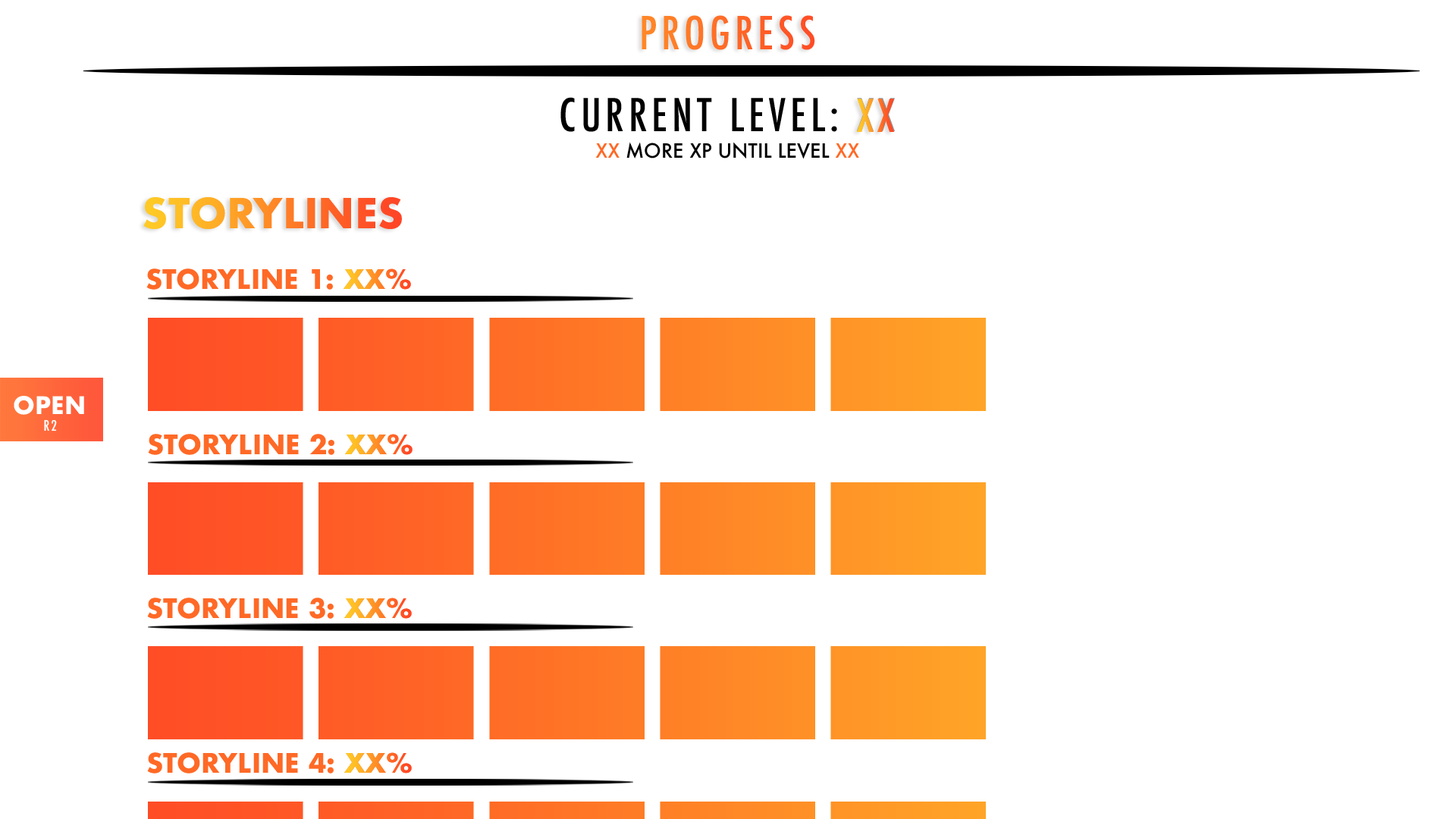
<style>
.page{position:relative;width:1456px;height:819px;background:#ffffff}
.page>*{position:absolute;margin:0}
.t1{font:44.2px "Futura-CondensedMedium";letter-spacing:0.1em}
.t2{font:44px "Futura-CondensedMedium";letter-spacing:0.1em;color:#000000}
.t3{font:44px "Futura-CondensedMedium";letter-spacing:0.1em;color:#939598}
.t4{font:44px "Futura-CondensedMedium";letter-spacing:0.1em}
.t5{font:19.1px "Futura-Medium";color:#000000}
.t6{font:19.1px "Futura-Medium";color:#ff6926}
.t7{font:19.1px "Futura-Medium";color:#ff6a27}
.t8{font:40.1px "Futura-Bold"}
.t9{font:26.2px "Futura-Bold";color:#ff6926}
.t10{font:26.2px "Futura-Bold"}
.t11{font:23.6px "Futura-Bold";color:#ffffff}
.t12{font:14.1px "Futura-CondensedMedium";letter-spacing:0.1em;color:#ffffff}
</style>
<div class="page">
<p class="t1" style="left:642px;top:15px;width:173px;height:35px">PROGRESS</p>
<p class="t2" style="left:560px;top:97px;width:335px;height:35px">CURRENT LEVEL: <span class="t3">XX</span></p>
<p class="t4" style="left:857px;top:99px;width:37px;height:33px">XX</p>
<p class="t5" style="left:595px;top:142px;width:264px;height:17px"><span class="t6">XX</span> MORE XP UNTIL LEVEL <span class="t7">XX</span></p>
<p class="t8" style="left:143px;top:197px;width:259px;height:32px">STORYLINES</p>
<p class="t9" style="left:146px;top:268px;width:265px;height:22px">STORYLINE 1: XX%</p>
<p class="t10" style="left:344px;top:268px;width:67px;height:22px">XX%</p>
<p class="t11" style="left:14px;top:396px;width:70px;height:19px">OPEN</p>
<p class="t12" style="left:44px;top:419px;width:13px;height:12px">R2</p>
<p class="t9" style="left:148px;top:434px;width:265px;height:21px">STORYLINE 2: XX%</p>
<p class="t10" style="left:345px;top:434px;width:68px;height:21px">XX%</p>
<p class="t9" style="left:147px;top:598px;width:265px;height:21px">STORYLINE 3: XX%</p>
<p class="t10" style="left:344px;top:598px;width:68px;height:21px">XX%</p>
<p class="t9" style="left:147px;top:752px;width:265px;height:21px">STORYLINE 4: XX%</p>
<p class="t10" style="left:344px;top:752px;width:68px;height:21px">XX%</p>
</div>
